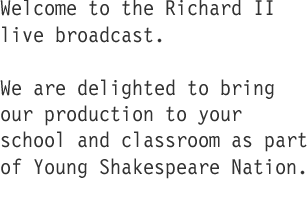
<style>
.page{position:relative;width:308px;height:199px;background:#ffffff}
.page>*{position:absolute;margin:0}
.t1{font:22px "LetterGothic12PitchBT-Roman";color:#323232}
</style>
<div class="page">
<p class="t1" style="left:0px;top:0px;width:307px;height:179px">Welcome to the Richard II live broadcast.<br><br>We are delighted to bring our production to your school and classroom as part of Young Shakespeare Nation.</p>
</div>
